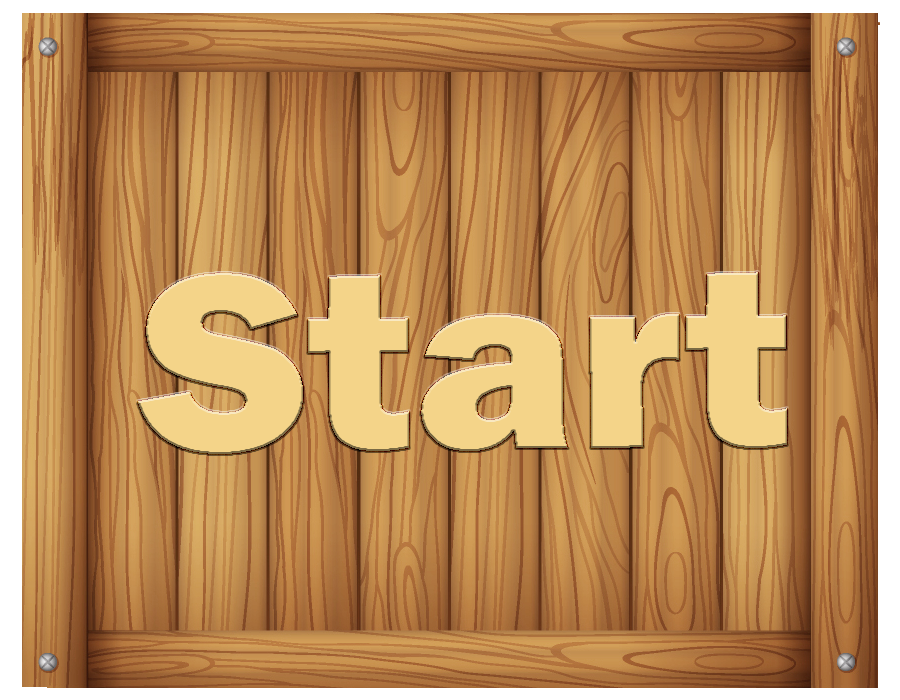
<style>
.page{position:relative;width:900px;height:700px}
.page>*{position:absolute;margin:0}
.t1{font:263.2px "FranklinGothic-Heavy";color:#f4d489;scale:1.05 1}
</style>
<div class="page">
<p class="t1" style="left:138px;top:272px;width:649px;height:182px;rotate:-1deg">Start</p>
</div>
